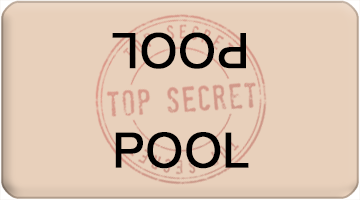
<style>
.page{position:relative;width:360px;height:200px;background:#e8d0bb}
.page>*{position:absolute;margin:0}
.t1{font:48px "ArialMT";color:#000000;font-weight:bold}
</style>
<div class="page">
<p class="t1" style="left:112px;top:32px;width:134px;height:37px;rotate:180deg">POOL</p>
<p class="t1" style="left:115px;top:132px;width:134px;height:37px">POOL</p>
</div>
